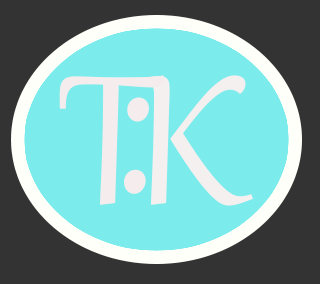
<style>
.page{position:relative;width:320px;height:284px;background:#7bebec}
.page>*{position:absolute;margin:0}
.t1{font:225.9px "Gabriola";color:#f5eded;scale:1.07 1}
.t2{font:225.9px "Gabriola";color:#f5f0f0;scale:1.07 1}
.t3{font:274px "Gabriola";color:#f5eded}
</style>
<div class="page">
<p class="t1" style="left:59px;top:75px;width:106px;height:130px">T</p>
<p class="t2" style="left:133px;top:75px;width:120px;height:131px">K</p>
<p class="t3" style="left:124px;top:97px;width:25px;height:97px">:</p>
</div>
